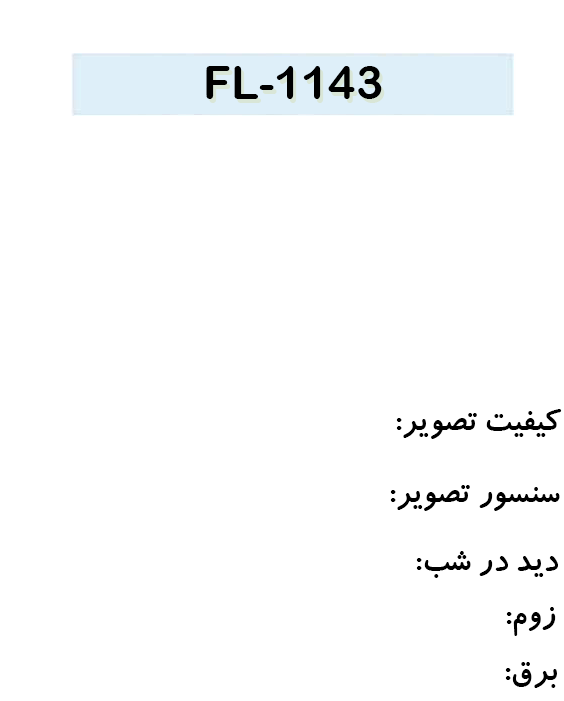
<style>
.page{position:relative;width:564px;height:701px;background:#ffffff}
.page>*{position:absolute;margin:0}
.t1{font:45.9px "ArialRoundedMTBold";color:#000000}
.t2{font:35.3px "BKoodakBold";color:#000000}
</style>
<div class="page">
<p class="t1" style="left:206px;top:66px;width:176px;height:33px">1143-FL</p>
<p class="t2" style="left:396px;top:409px;width:166px;height:30px">کیفیت تصویر:</p>
<p class="t2" style="left:390px;top:485px;width:170px;height:26px">سنسور تصویر:</p>
<p class="t2" style="left:416px;top:551px;width:142px;height:27px">دید در شب:</p>
<p class="t2" style="left:506px;top:607px;width:50px;height:29px">زوم:</p>
<p class="t2" style="left:505px;top:662px;width:52px;height:26px">برق:</p>
</div>
